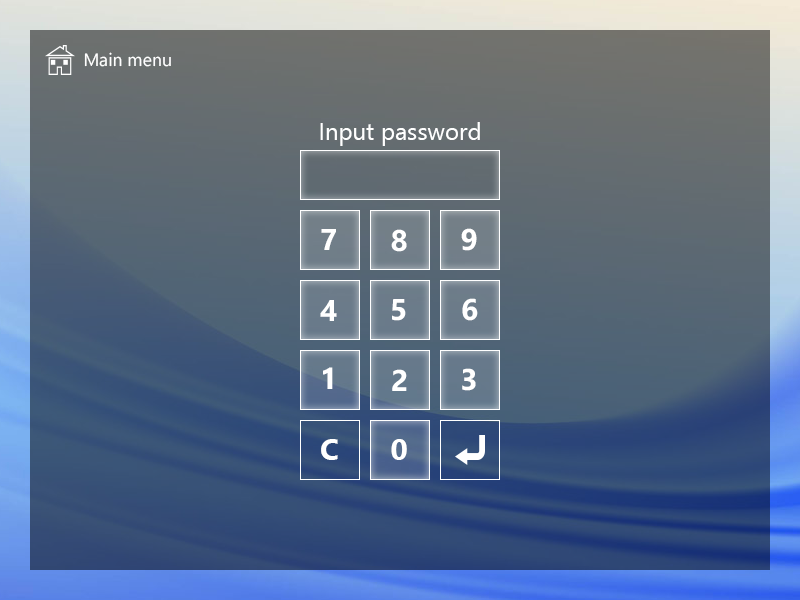
<style>
.page{position:relative;width:800px;height:600px}
.page>*{position:absolute;margin:0}
.t1{font:18px "SegoeUI";color:#ffffff}
.t2{font:24px "SegoeUI";color:#ffffff}
.t3{font:30px "SegoeUI-Bold";color:#ffffff}
</style>
<div class="page">
<p class="t1" style="left:84px;top:52px;width:87px;height:15px">Main menu</p>
<p class="t2" style="left:320px;top:122px;width:160px;height:24px">Input password</p>
<p class="t3" style="left:321px;top:229px;width:15px;height:21px">7</p>
<p class="t3" style="left:391px;top:229px;width:16px;height:23px">8</p>
<p class="t3" style="left:461px;top:228px;width:16px;height:23px">9</p>
<p class="t3" style="left:320px;top:300px;width:17px;height:21px">4</p>
<p class="t3" style="left:392px;top:299px;width:14px;height:22px">5</p>
<p class="t3" style="left:462px;top:298px;width:16px;height:23px">6</p>
<p class="t3" style="left:323px;top:367px;width:10px;height:22px">1</p>
<p class="t3" style="left:392px;top:369px;width:15px;height:22px">2</p>
<p class="t3" style="left:462px;top:368px;width:14px;height:23px">3</p>
<p class="t3" style="left:321px;top:439px;width:17px;height:21px">C</p>
<p class="t3" style="left:391px;top:439px;width:16px;height:21px">0</p>
</div>
